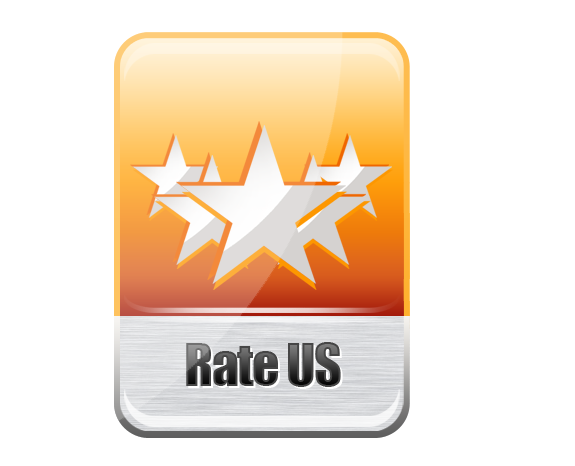
<style>
.page{position:relative;width:575px;height:466px;background:#ffffff}
.page>*{position:absolute;margin:0}
.t1{font:54px "Impact";letter-spacing:-0.03em}
</style>
<div class="page">
<p class="t1" style="left:186px;top:342px;width:155px;height:45px">Rate US</p>
<p class="t1" style="left:188px;top:344px;width:155px;height:45px">Rate US</p>
</div>
